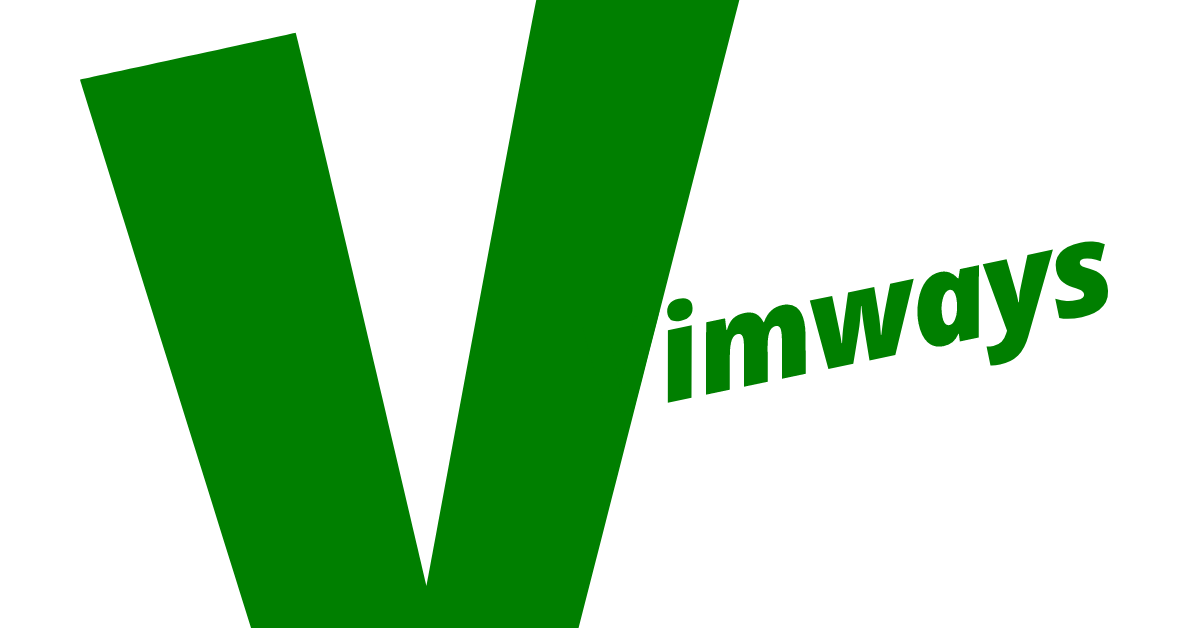
<style>
.page{position:relative;width:1200px;height:628px;background:#ffffff}
.page>*{position:absolute;margin:0}
.t1{font:128px "OpenSans-ExtraboldItalic";letter-spacing:-0.02em;color:#007f00}
</style>
<div class="page">
<p class="t1" style="left:582px;top:241px;width:527px;height:175px;rotate:-12deg">Vimways</p>
</div>
